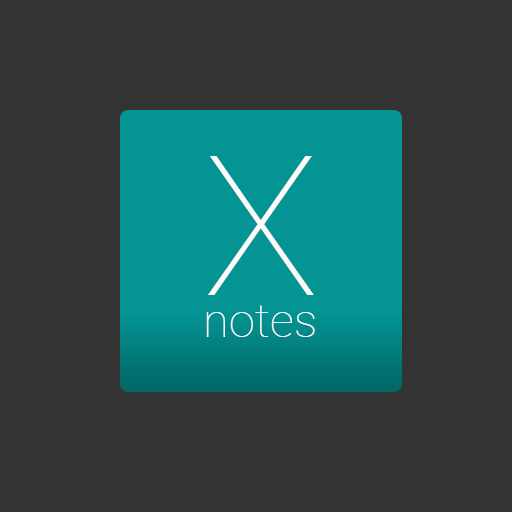
<style>
.page{position:relative;width:512px;height:512px;background:#333333}
.page>*{position:absolute;margin:0}
.t1{font:193.9px "Roboto-Thin";color:#fdfafa}
.t2{font:47.4px "Roboto-Thin";color:#fdfafa}
</style>
<div class="page">
<p class="t1" style="left:208px;top:156px;width:106px;height:139px">X</p>
<p class="t2" style="left:206px;top:305px;width:109px;height:32px">notes</p>
</div>
